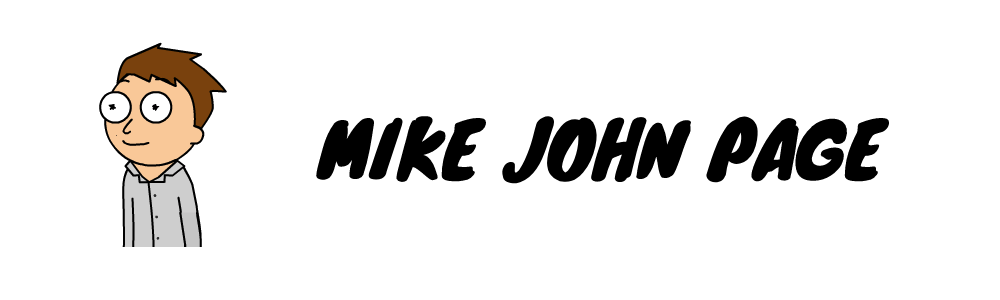
<style>
.page{position:relative;width:1000px;height:300px;background:#ffffff}
.page>*{position:absolute;margin:0}
.t1{font:75px "Knewave-Regular";color:#000000}
</style>
<div class="page">
<p class="t1" style="left:316px;top:115px;width:574px;height:69px">MIKE JOHN PAGE</p>
</div>
